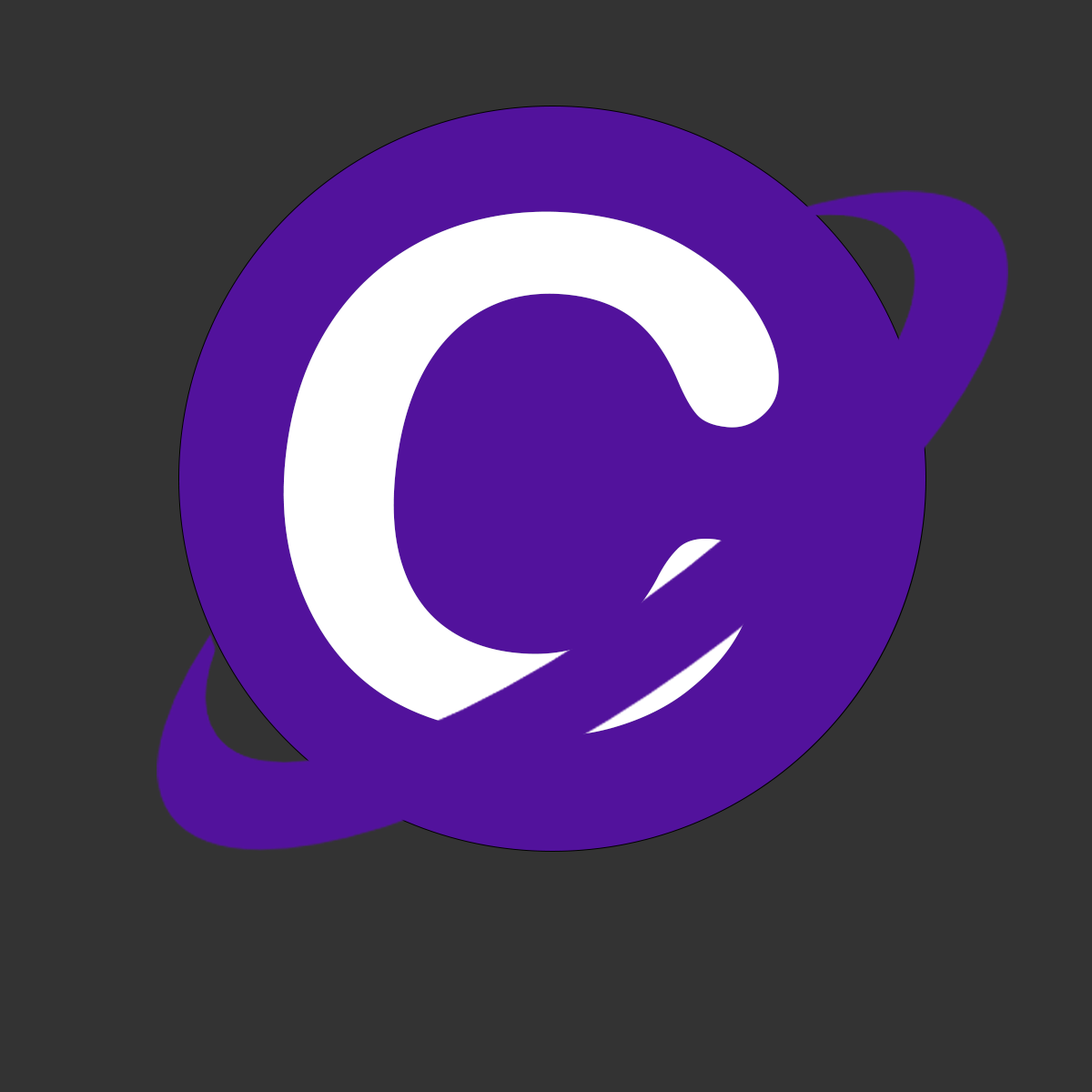
<style>
.page{position:relative;width:1092px;height:1092px;background:#333333}
.page>*{position:absolute;margin:0}
.t1{font:709.7px "ArialRoundedMTBold";color:#ffffff;scale:1.06 1}
</style>
<div class="page">
<p class="t1" style="left:283px;top:211px;width:496px;height:526px;rotate:5deg">C</p>
</div>
